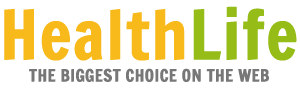
<style>
.page{position:relative;width:300px;height:89px;background:#ffffff}
.page>*{position:absolute;margin:0}
.t1{font:66.8px "FrancoisOne-Regular";color:#f8b91b;font-weight:bold}
.t2{font:66.8px "FrancoisOne-Regular";color:#95bc17;font-weight:bold}
.t3{font:16.7px "FrancoisOne-Regular";color:#777777;font-weight:bold}
</style>
<div class="page">
<p class="t1" style="left:4px;top:6px;width:293px;height:55px">Health<span class="t2">Life</span></p>
<p class="t3" style="left:29px;top:68px;width:240px;height:14px">THE BIGGEST CHOICE ON THE WEB</p>
</div>
